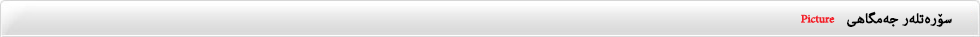
<style>
.page{position:relative;width:980px;height:37px}
.page>*{position:absolute;margin:0}
.t1{font:16px "AdobeArabic-Regular";letter-spacing:-0.02em;color:#f2202b;font-weight:bold}
.t2{font:19.2px "AdobeArabic-Regular";color:#020202;font-weight:bold}
</style>
<div class="page">
<p class="t1" style="left:801px;top:14px;width:34px;height:9px">Picture</p>
<p class="t2" style="left:847px;top:11px;width:105px;height:16px">سۆرەتلەر جەمگاھى</p>
</div>
